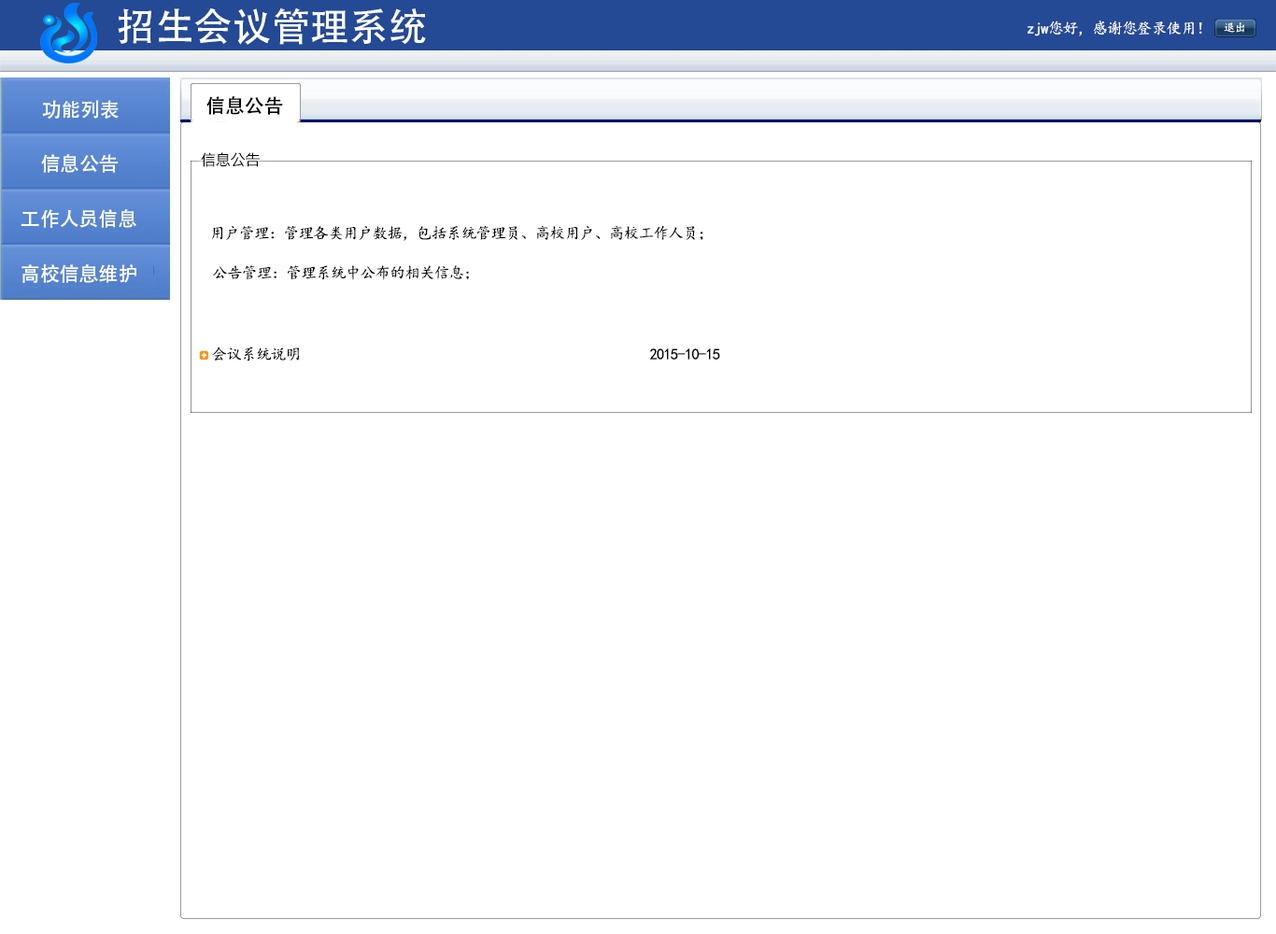
<style>
.page{position:relative;width:1276px;height:934px;background:#ffffff}
.page>*{position:absolute;margin:0}
.t1{font:38.9px "AdobeHeitiStd-Regular";color:#ffffff}
.t2{font:15.6px "KaiTi";letter-spacing:-0.05em;color:#ffffff}
.t3{font:11.7px "KaiTi";letter-spacing:-0.05em;color:#ffffff}
.t4{font:19.5px "AdobeHeitiStd-Regular";color:#fefefe}
.t5{font:19.5px "AdobeHeitiStd-Regular";color:#000000}
.t6{font:15.6px "MicrosoftJhengHeiRegular";letter-spacing:-0.05em;color:#000000}
.t7{font:15.6px "KaiTi";letter-spacing:-0.05em;color:#000000}
</style>
<div class="page">
<p class="t1" style="left:118px;top:7px;width:308px;height:38px">招生会议管理系统</p>
<p class="t2" style="left:1028px;top:21px;width:174px;height:15px">zjw您好，感谢您登录使用！</p>
<p class="t3" style="left:1224px;top:22px;width:21px;height:11px">退出</p>
<p class="t4" style="left:42px;top:100px;width:77px;height:20px">功能列表</p>
<p class="t5" style="left:206px;top:96px;width:77px;height:19px">信息公告</p>
<p class="t4" style="left:41px;top:154px;width:78px;height:19px">信息公告</p>
<p class="t6" style="left:201px;top:152px;width:59px;height:15px">信息公告</p>
<p class="t4" style="left:21px;top:209px;width:115px;height:19px">工作人员信息</p>
<p class="t7" style="left:212px;top:225px;width:492px;height:16px">用户管理：管理各类用户数据，包括系统管理员、高校用户、高校工作人员；</p>
<p class="t4" style="left:21px;top:264px;width:115px;height:19px">高校信息维护</p>
<p class="t7" style="left:213px;top:265px;width:256px;height:15px">公告管理：管理系统中公布的相关信息；</p>
<p class="t7" style="left:212px;top:347px;width:87px;height:15px">会议系统说明</p>
<p class="t7" style="left:649px;top:348px;width:71px;height:12px">2015-10-15</p>
</div>
